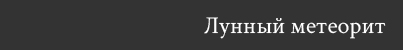
<style>
.page{position:relative;width:403px;height:50px;background:#333333}
.page>*{position:absolute;margin:0}
.t1{font:24px "CrimsonText-Regular";color:#ffffff}
</style>
<div class="page">
<p class="t1" style="left:204px;top:17px;width:182px;height:22px">Лунный метеорит</p>
</div>
